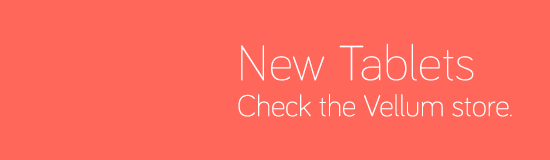
<style>
.page{position:relative;width:550px;height:160px;background:#ff675b}
.page>*{position:absolute;margin:0}
.t1{font:51px "Bariol-Light";color:#ffffff}
.t2{font:30.6px "Bariol-Light";color:#fffffe}
</style>
<div class="page">
<p class="t1" style="left:241px;top:43px;width:233px;height:38px">New Tablets</p>
<p class="t2" style="left:238px;top:94px;width:274px;height:23px">Check the Vellum store.</p>
</div>
